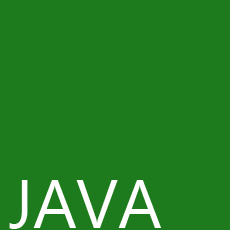
<style>
.page{position:relative;width:230px;height:230px;background:#1d7b1d}
.page>*{position:absolute;margin:0}
.t1{font:67.7px "Leelawadee";color:#ffffff}
</style>
<div class="page">
<p class="t1" style="left:9px;top:180px;width:152px;height:49px">JAVA</p>
</div>
